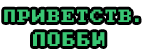
<style>
.page{position:relative;width:144px;height:56px;background:#ffffff}
.page>*{position:absolute;margin:0}
.t1{font:13.9px "PxPlus_IBM_BIOS";letter-spacing:0.075em;color:#39c773}
.t2{font:19.9px "PixelDigivolveCyrillic";letter-spacing:0.075em;color:#39c773}
</style>
<div class="page">
<p class="t1" style="left:4px;top:9px;width:135px;height:13px">ПРИВЕТСТВ.</p>
<p class="t2" style="left:33px;top:32px;width:72px;height:14px">ЛОББИ</p>
</div>
